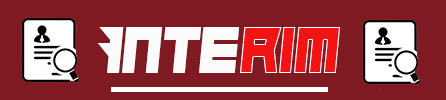
<style>
.page{position:relative;width:446px;height:100px;background:#7f1a22}
.page>*{position:absolute;margin:0}
.t1{font:66.7px "Hindsight2020";color:#fbfbfb;scale:0.92 1}
.t2{font:66.7px "Hindsight2020";color:#f21414;scale:0.92 1}
</style>
<div class="page">
<p class="t1" style="left:97px;top:27px;width:143px;height:46px">Inte</p>
<p class="t2" style="left:240px;top:27px;width:101px;height:46px">rim</p>
</div>
